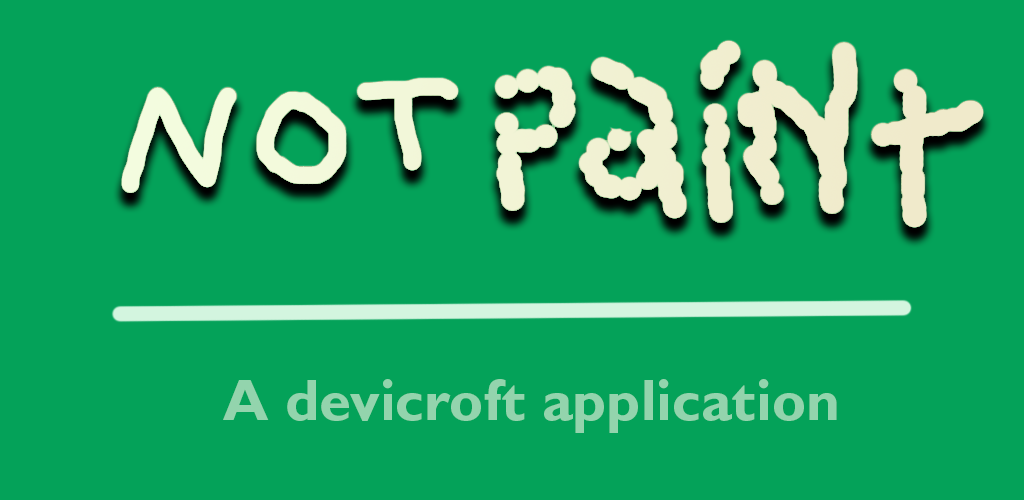
<style>
.page{position:relative;width:1024px;height:500px;background:#04a259}
.page>*{position:absolute;margin:0}
.t1{font:58.3px "GillSansMTPro-Bold";color:#93d4ad}
</style>
<div class="page">
<p class="t1" style="left:223px;top:379px;width:614px;height:54px">A devicroft application</p>
</div>
